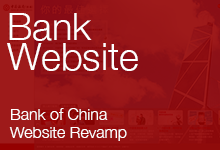
<style>
.page{position:relative;width:220px;height:150px}
.page>*{position:absolute;margin:0}
.t1{font:38px/30px "HelveticaNeue-Light";color:#ffffff}
.t2{font:16px/18px "HelveticaNeue-Light";color:#ffffff}
</style>
<div class="page">
<p class="t1" style="left:7px;top:13px;width:131px;height:58px">Bank<br>Website</p>
<p class="t2" style="left:9px;top:108px;width:118px;height:33px">Bank of China<br>Website Revamp</p>
</div>
